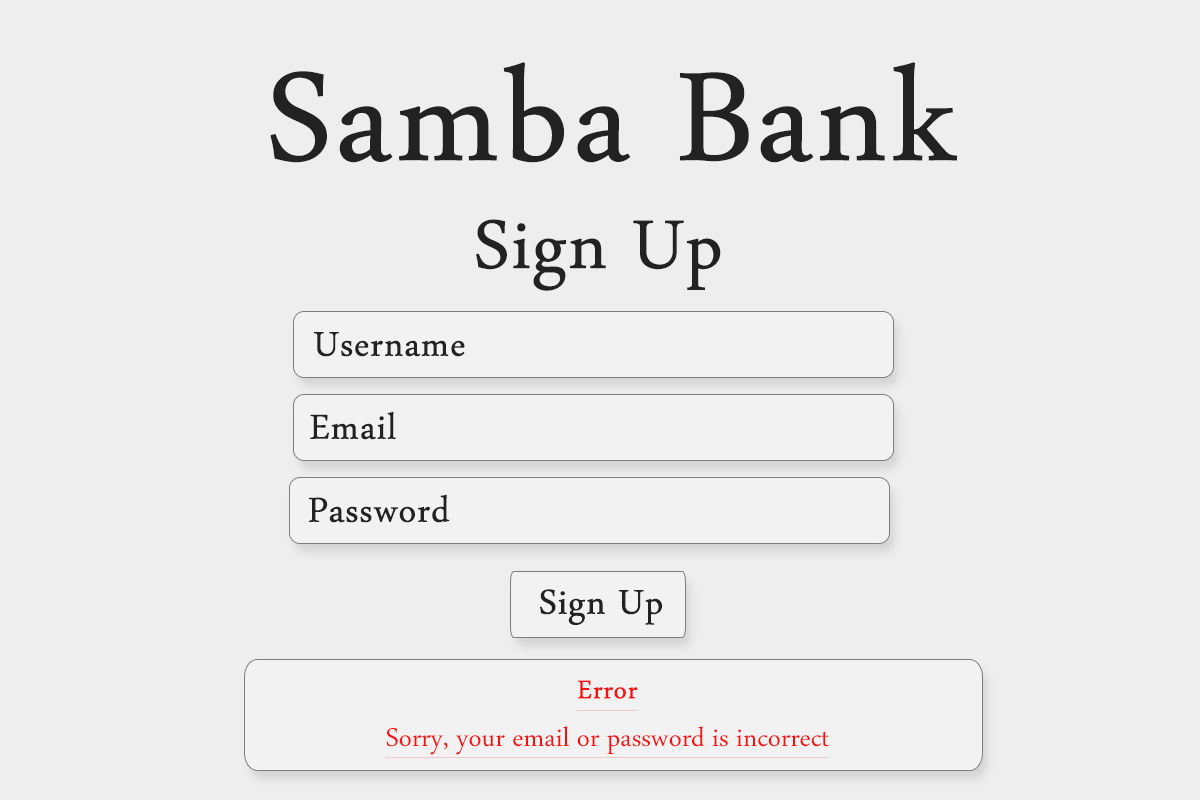
<style>
.page{position:relative;width:1200px;height:800px;background:#eeeeee}
.page>*{position:absolute;margin:0}
.t1{font:183.3px "ArabicTypesetting";color:#222222;font-weight:bold}
.t2{font:100px "ArabicTypesetting";color:#222222;font-weight:bold}
.t3{font:50px "ArabicTypesetting";color:#222222;font-weight:bold}
.t4{font:37.5px "ArabicTypesetting";color:#f61010;text-decoration:underline}
.t5{font:37.5px "ArabicTypesetting";color:#f61010;font-weight:bold;text-decoration:underline}
</style>
<div class="page">
<p class="t1" style="left:270px;top:62px;width:688px;height:101px">Samba Bank</p>
<p class="t2" style="left:476px;top:219px;width:245px;height:72px">Sign Up</p>
<p class="t3" style="left:314px;top:332px;width:151px;height:25px">Username</p>
<p class="t3" style="left:310px;top:411px;width:86px;height:29px">Email</p>
<p class="t3" style="left:309px;top:494px;width:141px;height:29px">Password</p>
<p class="t3" style="left:540px;top:589px;width:122px;height:36px">Sign Up</p>
<p class="t4" style="left:385px;top:680px;width:445px;height:78px;text-align:center"><span class="t5">Error<br></span>Sorry, your email or password is incorrect</p>
</div>
